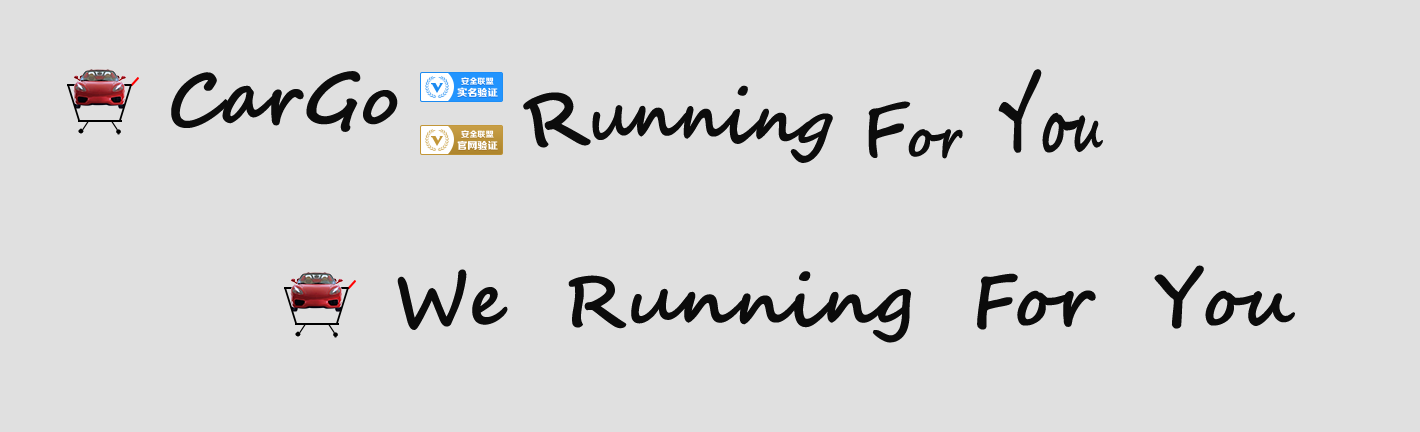
<style>
.page{position:relative;width:1420px;height:432px;background:#e0e0e0}
.page>*{position:absolute;margin:0}
.t1{font:72px "SegoeScript-Bold";color:#0c0c0c}
.t2{font:48px "SegoeScript-Bold";color:#0c0c0c}
.t3{font:60px "SegoeScript-Bold";color:#0c0c0c}
.t4{font:72px "SegoeScript-Bold";color:#0b0b0b}
</style>
<div class="page">
<p class="t1" style="left:171px;top:71px;width:227px;height:61px">CarGo</p>
<p class="t2" style="left:998px;top:69px;width:105px;height:84px"><span class="t3">Y</span>ou</p>
<p class="t3" style="left:523px;top:85px;width:310px;height:78px"><span class="t1">R</span>unning</p>
<p class="t2" style="left:868px;top:101px;width:95px;height:58px"><span class="t1">F</span>or</p>
<p class="t4" style="left:397px;top:265px;width:898px;height:78px">We  Running  For  You</p>
</div>
